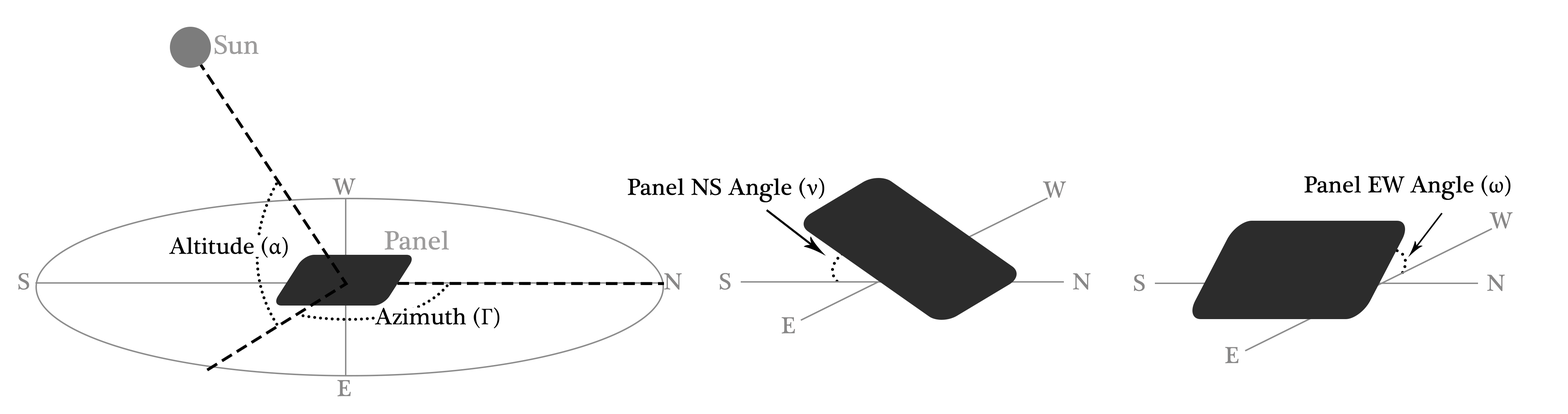
<style>
.page{position:relative;width:1568px;height:414px;background:#ffffff}
.page>*{position:absolute;margin:0}
.t1{font:27px "PlantagenetCherokee";color:#a5a4a4}
.t2{font:23.7px "PlantagenetCherokee";color:#888787}
.t3{font:23.7px "PlantagenetCherokee";color:#000000}
.t4{font:23.7px "MinionPro-Regular";color:#000000}
</style>
<div class="page">
<p class="t1" style="left:214px;top:35px;width:44px;height:19px">Sun</p>
<p class="t2" style="left:332px;top:178px;width:24px;height:17px">W</p>
<p class="t3" style="left:627px;top:178px;width:197px;height:24px">Panel NS Angle (<span class="t4">ν)</span></p>
<p class="t2" style="left:1043px;top:181px;width:23px;height:17px">W</p>
<p class="t3" style="left:1304px;top:175px;width:207px;height:25px">Panel EW Angle (<span class="t4">ω)</span></p>
<p class="t2" style="left:1489px;top:212px;width:24px;height:17px">W</p>
<p class="t1" style="left:384px;top:230px;width:65px;height:20px">Panel</p>
<p class="t3" style="left:169px;top:237px;width:119px;height:21px">Altitude (<span class="t4">α)</span></p>
<p class="t2" style="left:18px;top:273px;width:11px;height:17px">S</p>
<p class="t2" style="left:664px;top:273px;width:18px;height:17px">N</p>
<p class="t2" style="left:720px;top:273px;width:11px;height:17px">S</p>
<p class="t2" style="left:1073px;top:273px;width:18px;height:17px">N</p>
<p class="t2" style="left:1134px;top:274px;width:11px;height:17px">S</p>
<p class="t2" style="left:1487px;top:274px;width:18px;height:17px">N</p>
<p class="t3" style="left:375px;top:307px;width:125px;height:21px">Azimuth (<span class="t4">Γ)</span></p>
<p class="t2" style="left:781px;top:317px;width:14px;height:17px">E</p>
<p class="t2" style="left:1225px;top:347px;width:14px;height:16px">E</p>
<p class="t2" style="left:337px;top:380px;width:14px;height:16px">E</p>
</div>
